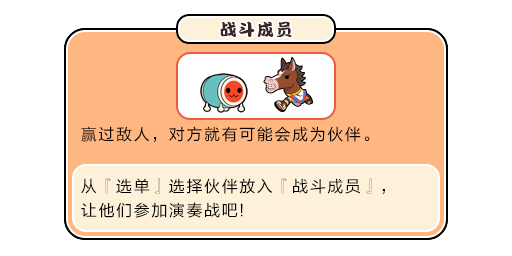
<style>
.page{position:relative;width:512px;height:256px;background:#ffffff}
.page>*{position:absolute;margin:0}
.t1{font:17px "DFPKanTingLiuW9";letter-spacing:0.1em;color:#3b2626}
.t2{font:16px "FZLTHJW--GB1-0";letter-spacing:0.1em;color:#000000}
.t3{font:16px/24px "FZLTHJW--GB1-0";letter-spacing:0.1em;color:#000000}
</style>
<div class="page">
<p class="t1" style="left:220px;top:21px;width:72px;height:17px">战斗成员</p>
<p class="t2" style="left:81px;top:126px;width:289px;height:16px">赢过敌人，对方就有可能会成为伙伴。</p>
<p class="t3" style="left:81px;top:178px;width:304px;height:40px">从『选单』选择伙伴放入『战斗成员』，<br>让他们参加演奏战吧!</p>
</div>
